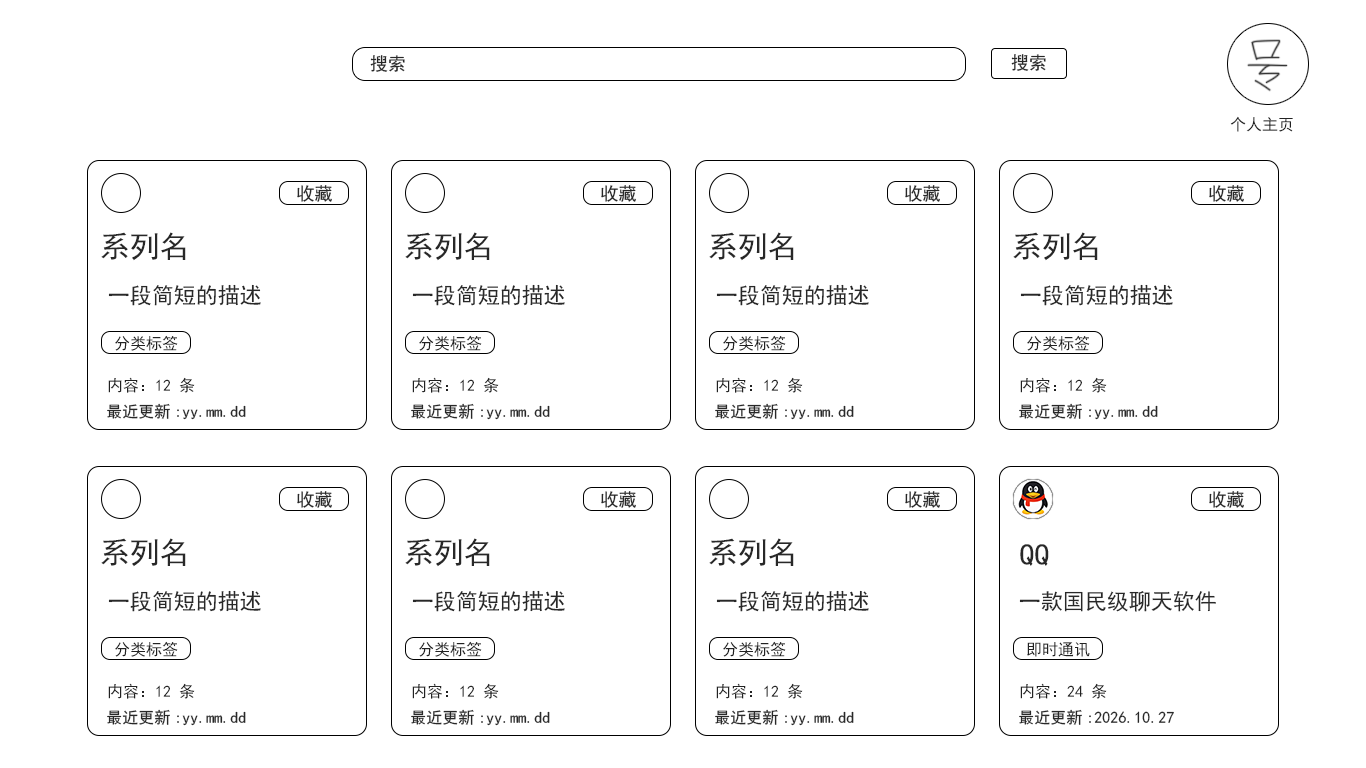
<style>
.page{position:relative;width:1366px;height:768px;background:#ffffff}
.page>*{position:absolute;margin:0}
.t1{font:18px "SimHei";color:#282828}
.t2{font:16px "SimHei";color:#222222}
.t3{font:30px "SimHei";color:#282828}
.t4{font:22px "SimHei";color:#282828}
.t5{font:16px "SimHei";color:#282828}
</style>
<div class="page">
<p class="t1" style="left:1011px;top:54px;width:35px;height:17px">搜索</p>
<p class="t1" style="left:370px;top:55px;width:35px;height:17px">搜索</p>
<p class="t2" style="left:1230px;top:116px;width:63px;height:16px">个人主页</p>
<p class="t1" style="left:297px;top:185px;width:35px;height:17px">收藏</p>
<p class="t1" style="left:601px;top:185px;width:35px;height:17px">收藏</p>
<p class="t1" style="left:905px;top:185px;width:35px;height:17px">收藏</p>
<p class="t1" style="left:1209px;top:185px;width:35px;height:17px">收藏</p>
<p class="t3" style="left:101px;top:232px;width:85px;height:29px">系列名</p>
<p class="t3" style="left:405px;top:232px;width:85px;height:29px">系列名</p>
<p class="t3" style="left:709px;top:232px;width:85px;height:29px">系列名</p>
<p class="t3" style="left:1013px;top:232px;width:85px;height:29px">系列名</p>
<p class="t4" style="left:108px;top:284px;width:153px;height:22px">一段简短的描述</p>
<p class="t4" style="left:412px;top:284px;width:153px;height:22px">一段简短的描述</p>
<p class="t4" style="left:716px;top:284px;width:153px;height:22px">一段简短的描述</p>
<p class="t4" style="left:1020px;top:284px;width:153px;height:22px">一段简短的描述</p>
<p class="t2" style="left:115px;top:335px;width:63px;height:16px">分类标签</p>
<p class="t2" style="left:419px;top:335px;width:63px;height:16px">分类标签</p>
<p class="t2" style="left:723px;top:335px;width:63px;height:16px">分类标签</p>
<p class="t2" style="left:1027px;top:335px;width:63px;height:16px">分类标签</p>
<p class="t2" style="left:108px;top:377px;width:87px;height:16px">内容：12 条</p>
<p class="t2" style="left:412px;top:377px;width:87px;height:16px">内容：12 条</p>
<p class="t2" style="left:716px;top:377px;width:87px;height:16px">内容：12 条</p>
<p class="t2" style="left:1020px;top:377px;width:87px;height:16px">内容：12 条</p>
<p class="t5" style="left:107px;top:403px;width:139px;height:17px">最近更新:yy.mm.dd</p>
<p class="t5" style="left:411px;top:403px;width:139px;height:17px">最近更新:yy.mm.dd</p>
<p class="t5" style="left:715px;top:403px;width:139px;height:17px">最近更新:yy.mm.dd</p>
<p class="t5" style="left:1019px;top:403px;width:139px;height:17px">最近更新:yy.mm.dd</p>
<p class="t1" style="left:297px;top:491px;width:35px;height:17px">收藏</p>
<p class="t1" style="left:601px;top:491px;width:35px;height:17px">收藏</p>
<p class="t1" style="left:905px;top:491px;width:35px;height:17px">收藏</p>
<p class="t1" style="left:1209px;top:491px;width:35px;height:17px">收藏</p>
<p class="t3" style="left:101px;top:538px;width:85px;height:29px">系列名</p>
<p class="t3" style="left:405px;top:538px;width:85px;height:29px">系列名</p>
<p class="t3" style="left:709px;top:538px;width:85px;height:29px">系列名</p>
<p class="t3" style="left:1020px;top:544px;width:29px;height:22px">QQ</p>
<p class="t4" style="left:108px;top:590px;width:153px;height:22px">一段简短的描述</p>
<p class="t4" style="left:412px;top:590px;width:153px;height:22px">一段简短的描述</p>
<p class="t4" style="left:716px;top:590px;width:153px;height:22px">一段简短的描述</p>
<p class="t4" style="left:1019px;top:591px;width:197px;height:21px">一款国民级聊天软件</p>
<p class="t2" style="left:115px;top:641px;width:63px;height:16px">分类标签</p>
<p class="t2" style="left:419px;top:641px;width:63px;height:16px">分类标签</p>
<p class="t2" style="left:723px;top:641px;width:63px;height:16px">分类标签</p>
<p class="t2" style="left:1027px;top:642px;width:63px;height:15px">即时通讯</p>
<p class="t2" style="left:108px;top:683px;width:87px;height:16px">内容：12 条</p>
<p class="t2" style="left:412px;top:683px;width:87px;height:16px">内容：12 条</p>
<p class="t2" style="left:716px;top:683px;width:87px;height:16px">内容：12 条</p>
<p class="t2" style="left:1020px;top:683px;width:87px;height:16px">内容：24 条</p>
<p class="t5" style="left:107px;top:709px;width:139px;height:17px">最近更新:yy.mm.dd</p>
<p class="t5" style="left:411px;top:709px;width:139px;height:17px">最近更新:yy.mm.dd</p>
<p class="t5" style="left:715px;top:709px;width:139px;height:17px">最近更新:yy.mm.dd</p>
<p class="t5" style="left:1019px;top:709px;width:155px;height:16px">最近更新:2026.10.27</p>
</div>
